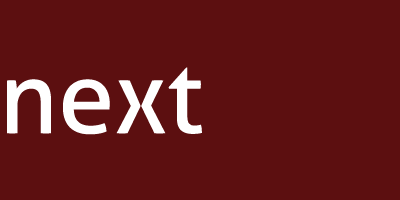
<style>
.page{position:relative;width:400px;height:200px;background:#5c0f10}
.page>*{position:absolute;margin:0}
.t1{font:102px "Aller";color:#ffffff}
</style>
<div class="page">
<p class="t1" style="left:7px;top:67px;width:195px;height:68px">next</p>
</div>
